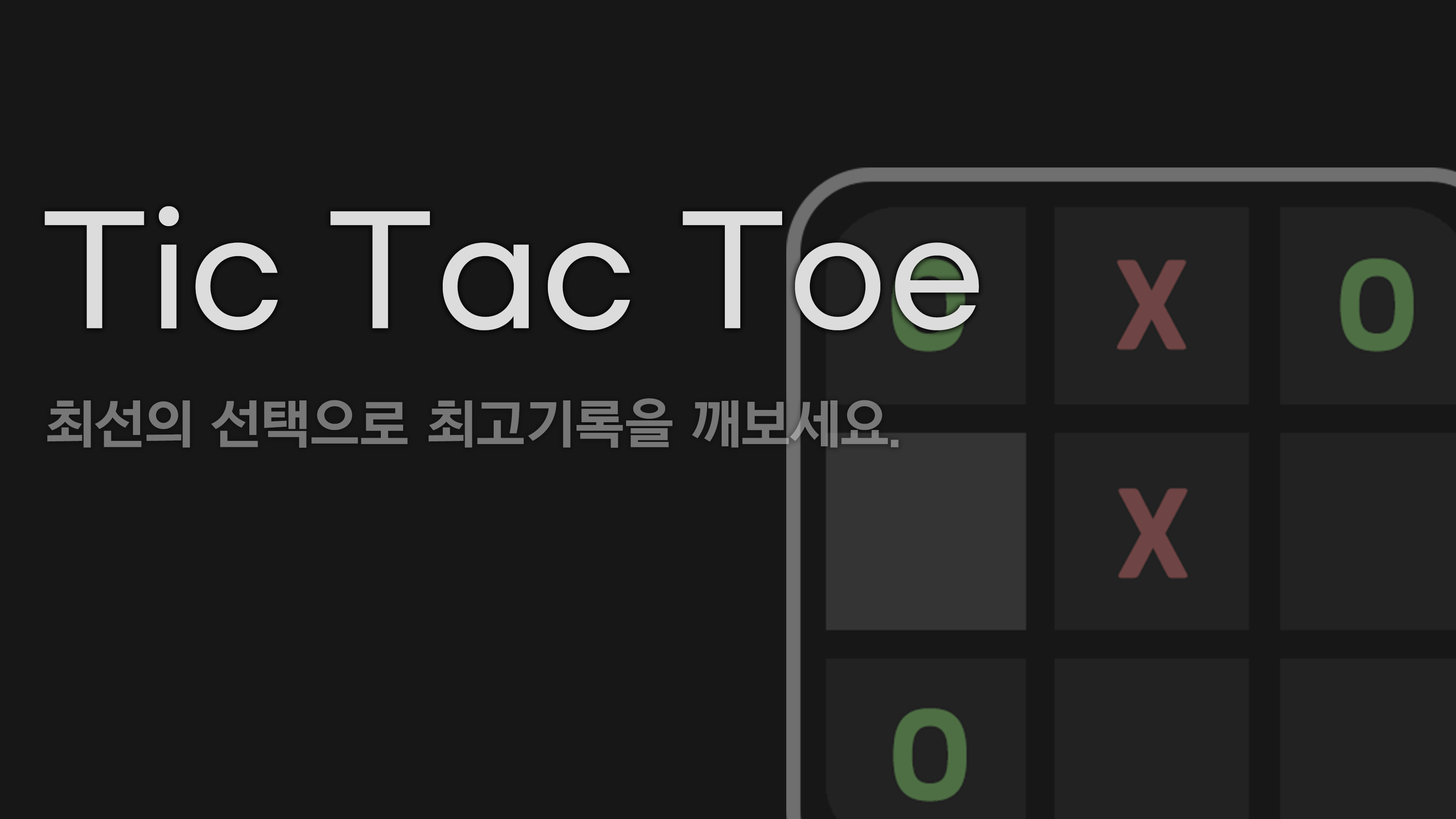
<style>
.page{position:relative;width:1456px;height:819px;background:#171717}
.page>*{position:absolute;margin:0}
.t1{font:145.8px "GmarketSansTTFMedium";color:#dcdcdc}
.t2{font:52.5px "NEXONLv1GothicBold";color:#777777}
</style>
<div class="page">
<p class="t1" style="left:45px;top:206px;width:934px;height:124px">Tic Tac Toe</p>
<p class="t2" style="left:47px;top:398px;width:852px;height:50px">최선의 선택으로 최고기록을 깨보세요.</p>
</div>
